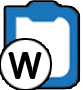
<style>
.page{position:relative;width:83px;height:90px;background:#ffffff}
.page>*{position:absolute;margin:0}
.t1{font:34px "ArialMT";color:#010000}
</style>
<div class="page">
<p class="t1" style="left:9px;top:53px;width:32px;height:25px">W</p>
</div>
